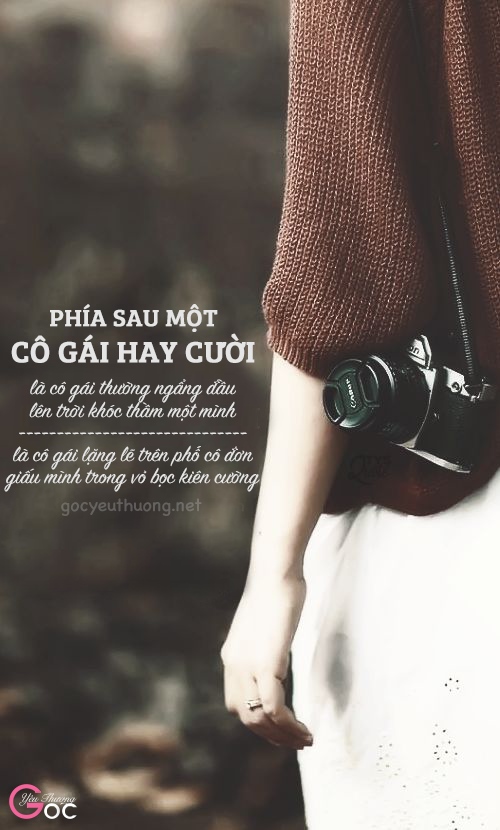
<style>
.page{position:relative;width:500px;height:830px}
.page>*{position:absolute;margin:0}
.t1{font:30px "BreeSerif";color:#e5e5e5;text-transform:uppercase;font-weight:bold}
.t2{font:24px "BreeSerif";color:#e5e5e5;text-transform:uppercase;font-weight:bold}
.t3{font:23.5px/22.2px "SignPainter-HouseScript";color:#e5e5e5}
.t4{font:18px "ChalkboardSE-Regular";color:#666360}
.t5{font:12.3px "SnellRoundhand";scale:0.92 1}
</style>
<div class="page">
<p class="t1" style="left:11px;top:304px;width:244px;height:59px;text-align:center"><span class="t2">Phía sau một<br></span>Cô gái hay cười</p>
<p class="t3" style="left:4px;top:378px;width:256px;height:114px;text-align:center">là cô gái thường ngẩng đầu<br>lên trời khóc thầm một mình<br>------------------------------<br>là cô gái lặng lẽ trên phố cô đơn<br>giấu mình trong vỏ bọc kiên cường</p>
<p class="t4" style="left:61px;top:498px;width:141px;height:18px">gocyeuthuong.net</p>
<p class="t5" style="left:19px;top:793px;width:42px;height:13px">Yêu Thư</p>
<p class="t5" style="left:59px;top:797px;width:7px;height:5px">ơ</p>
<p class="t5" style="left:64px;top:797px;width:13px;height:9px">ng</p>
</div>
